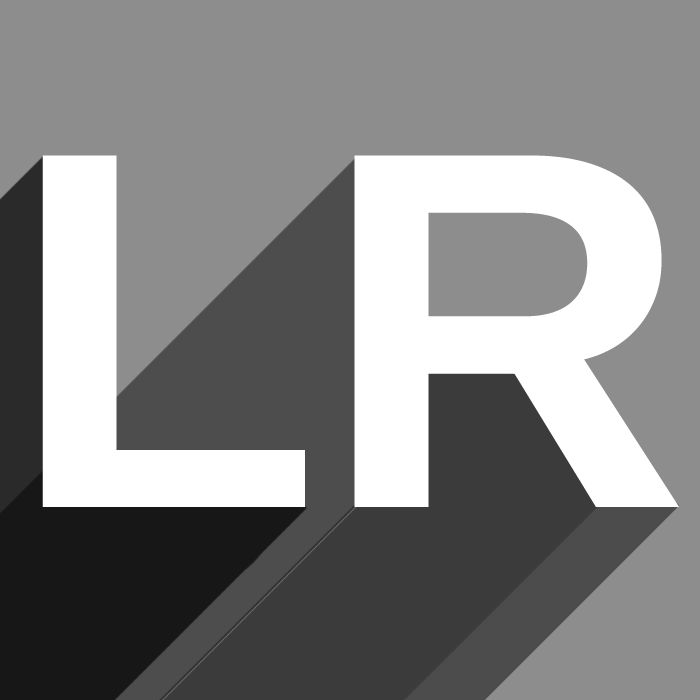
<style>
.page{position:relative;width:700px;height:700px;background:#8d8d8d}
.page>*{position:absolute;margin:0}
.t1{font:510.7px "LiberationSans-Bold";color:#ffffff}
</style>
<div class="page">
<p class="t1" style="left:42px;top:155px;width:637px;height:352px">LR</p>
</div>
